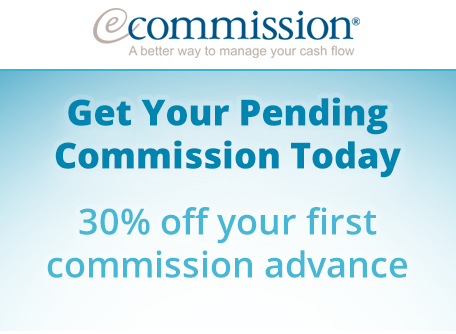
<style>
.page{position:relative;width:456px;height:334px}
.page>*{position:absolute;margin:0}
.t1{font:36px "OpenSans-Extrabold";color:#0085b0}
.t2{font:36px "OpenSans-Semibold";color:#46b7d5}
</style>
<div class="page">
<p class="t1" style="left:55px;top:97px;width:346px;height:81px;text-align:center">Get Your Pending<br>Commission Today</p>
<p class="t2" style="left:47px;top:207px;width:360px;height:71px;text-align:center">30% off your first<br>commission advance</p>
</div>
